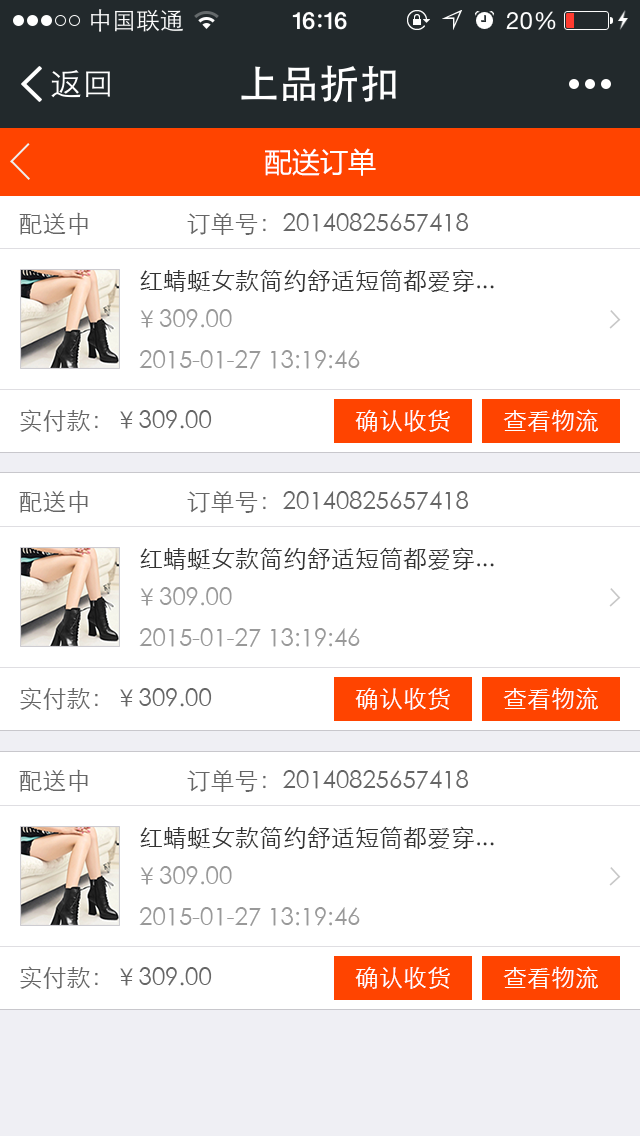
<style>
.page{position:relative;width:640px;height:1136px;background:#ffffff}
.page>*{position:absolute;margin:0}
.t1{font:28px "MicrosoftYaHei";color:#ffffff}
.t2{font:24px "STXihei";color:#666666}
.t3{font:24px "STXihei";color:#333333}
.t4{font:24px "STXihei";color:#999999}
.t5{font:24px "STXihei";color:#ffffff}
</style>
<div class="page">
<p class="t1" style="left:265px;top:148px;width:111px;height:28px">配送订单</p>
<p class="t2" style="left:19px;top:212px;width:450px;height:23px">配送中                订单号：20140825657418</p>
<p class="t3" style="left:140px;top:269px;width:354px;height:23px">红蜻蜓女款简约舒适短筒都爱穿...</p>
<p class="t4" style="left:140px;top:309px;width:92px;height:19px">￥309.00</p>
<p class="t4" style="left:139px;top:350px;width:221px;height:19px">2015-01-27 13:19:46</p>
<p class="t2" style="left:20px;top:409px;width:192px;height:23px">实付款：￥309.00</p>
<p class="t5" style="left:355px;top:409px;width:95px;height:23px">确认收货</p>
<p class="t5" style="left:503px;top:409px;width:95px;height:23px">查看物流</p>
<p class="t2" style="left:19px;top:490px;width:450px;height:23px">配送中                订单号：20140825657418</p>
<p class="t3" style="left:140px;top:547px;width:354px;height:23px">红蜻蜓女款简约舒适短筒都爱穿...</p>
<p class="t4" style="left:140px;top:587px;width:92px;height:19px">￥309.00</p>
<p class="t4" style="left:139px;top:628px;width:221px;height:19px">2015-01-27 13:19:46</p>
<p class="t2" style="left:20px;top:687px;width:192px;height:23px">实付款：￥309.00</p>
<p class="t5" style="left:355px;top:687px;width:95px;height:23px">确认收货</p>
<p class="t5" style="left:503px;top:687px;width:95px;height:23px">查看物流</p>
<p class="t2" style="left:19px;top:769px;width:450px;height:23px">配送中                订单号：20140825657418</p>
<p class="t3" style="left:140px;top:826px;width:354px;height:23px">红蜻蜓女款简约舒适短筒都爱穿...</p>
<p class="t4" style="left:140px;top:866px;width:92px;height:19px">￥309.00</p>
<p class="t4" style="left:139px;top:907px;width:221px;height:19px">2015-01-27 13:19:46</p>
<p class="t2" style="left:20px;top:966px;width:192px;height:23px">实付款：￥309.00</p>
<p class="t5" style="left:355px;top:966px;width:95px;height:23px">确认收货</p>
<p class="t5" style="left:503px;top:966px;width:95px;height:23px">查看物流</p>
</div>
